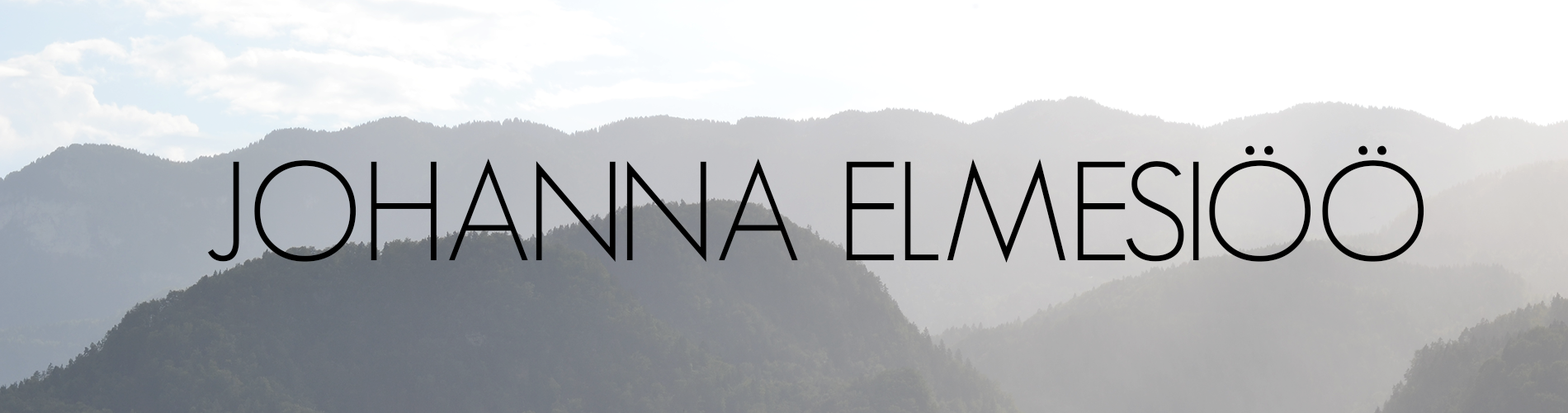
<style>
.page{position:relative;width:1568px;height:413px}
.page>*{position:absolute;margin:0}
.t1{font:137.5px "GeosansLight";color:#000000}
</style>
<div class="page">
<p class="t1" style="left:208px;top:145px;width:1216px;height:117px">JOHANNA ELMESIÖÖ</p>
</div>
